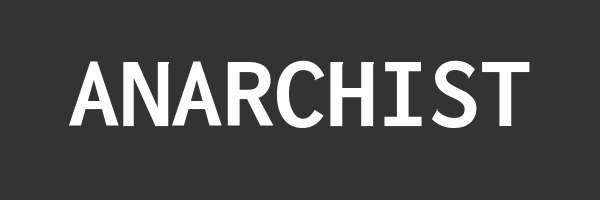
<style>
.page{position:relative;width:600px;height:200px;background:#333333}
.page>*{position:absolute;margin:0}
.t1{font:103px "Inconsolata-Bold";color:#fefefe}
</style>
<div class="page">
<p class="t1" style="left:69px;top:60px;width:461px;height:68px">ANARCHIST</p>
</div>
